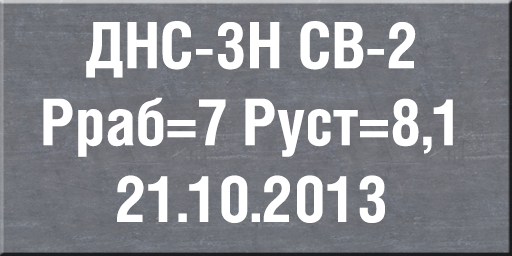
<style>
.page{position:relative;width:512px;height:256px}
.page>*{position:absolute;margin:0}
.t1{font:64px "HeliosCond-Bold";color:#ffffff}
</style>
<div class="page">
<p class="t1" style="left:43px;top:21px;width:410px;height:202px;text-align:center">ДНС-3Н СВ-2<br>Рраб=7 Руст=8,1<br>21.10.2013</p>
</div>
